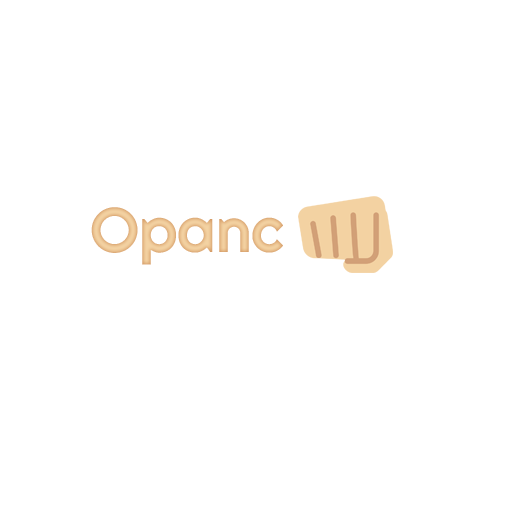
<style>
.page{position:relative;width:512px;height:512px;background:#ffffff}
.page>*{position:absolute;margin:0}
.t1{font:63.3px "Righteous-Regular";color:#f3d2a2}
</style>
<div class="page">
<p class="t1" style="left:91px;top:207px;width:192px;height:58px">Opanc</p>
</div>
